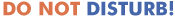
<style>
.page{position:relative;width:175px;height:18px;background:#ffffff}
.page>*{position:absolute;margin:0}
.t1{font:18.8px "FuturaBT-Bold";color:#4566aa}
.t2{font:18.8px "FuturaBT-Bold";color:#db734b}
</style>
<div class="page">
<p class="t1" style="left:3px;top:1px;width:171px;height:15px"><span class="t2">DO NOT </span>DISTURB!</p>
</div>
